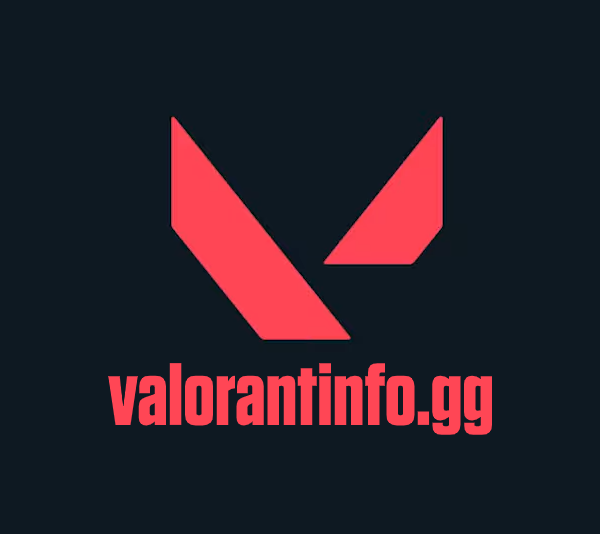
<style>
.page{position:relative;width:600px;height:534px;background:#0e1922}
.page>*{position:absolute;margin:0}
.t1{font:87px "Tungsten-Bold";color:#ff4655}
</style>
<div class="page">
<p class="t1" style="left:108px;top:363px;width:385px;height:72px">valorantinfo.gg</p>
</div>
